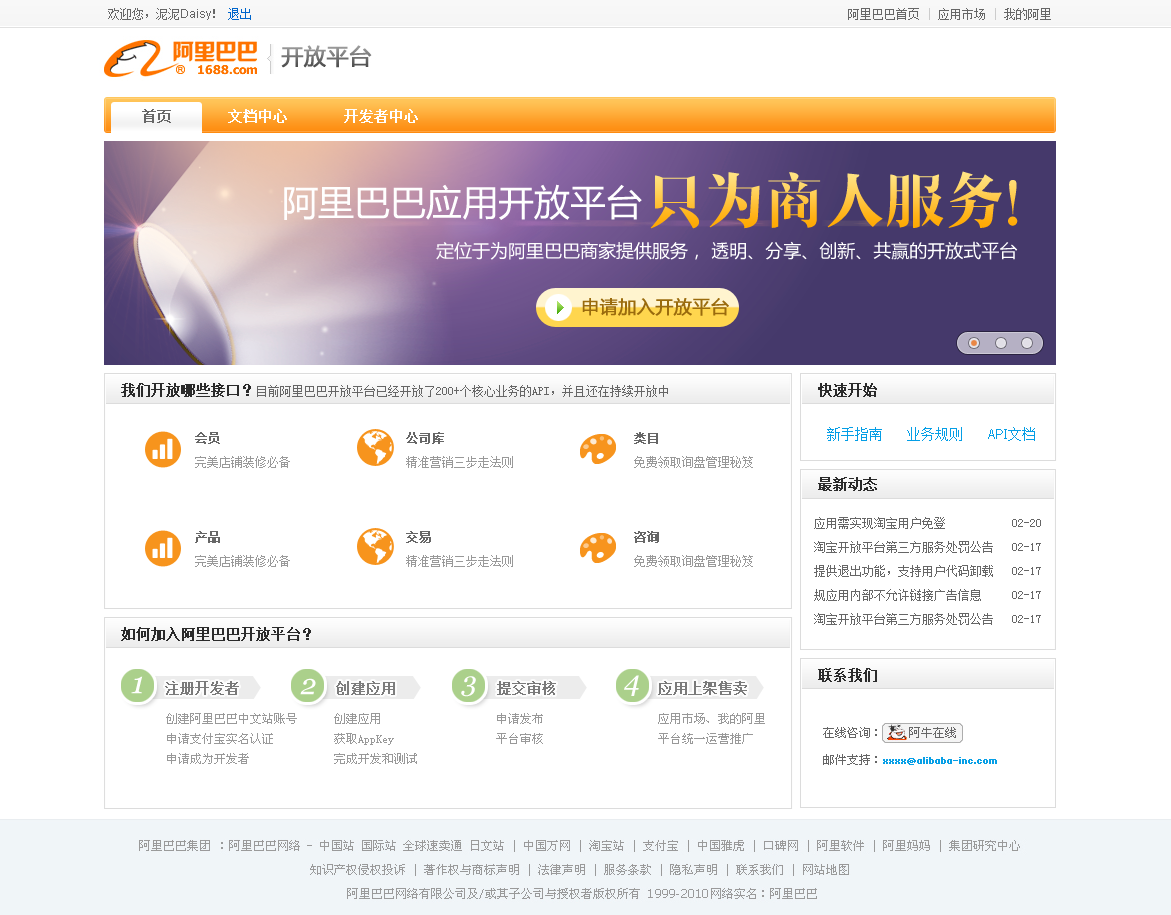
<style>
.page{position:relative;width:1171px;height:915px;background:#ffffff}
.page>*{position:absolute;margin:0}
.t1{font:12px "SimSun";color:#666666}
.t2{font:12px "ArialMT";color:#666666}
.t3{font:12px "SimSun";color:#0066cc}
.t4{font:12px "SimSun";color:#cccccc}
.t5{font:14px "SimSun";color:#ffffff;font-weight:bold}
.t6{font:14px "SimSun";color:#666666;font-weight:bold}
.t7{font:60px "RTWSShangYaTrial-Regular"}
.t8{font:36px "MicrosoftYaHei";color:#ffffff}
.t9{font:18px "MicrosoftYaHei";color:#ffffff}
.t10{font:18px "MicrosoftYaHei";color:#9a6b0d;font-weight:bold}
.t11{font:14px "SimSun";color:#2b2b2b;font-weight:bold}
.t12{font:12px/24px "SimSun";color:#999999}
.t13{font:12px/24px "SimSun";color:#666666;font-weight:bold}
.t14{font:14px "SimSun";color:#049ee6}
.t15{font:14px "Tahoma";color:#049ee6}
.t16{font:12px/24px "SimSun";color:#666666}
.t17{font:12px/24px "SimSun";letter-spacing:0.025em;color:#666666;font-weight:bold}
.t18{font:30.5px "Georgia-Italic";color:#ffffff}
.t19{font:28.8px "Georgia-Italic";color:#ffffff}
.t20{font:27.7px "Georgia-Italic";color:#ffffff}
.t21{font:28.5px "Georgia-Italic";color:#ffffff}
.t22{font:12px/20px "OldSun";color:#999999}
</style>
<div class="page">
<p class="t1" style="left:108px;top:8px;width:107px;height:12px">欢迎您，泥泥<span class="t2">Daisy</span>！</p>
<p class="t3" style="left:228px;top:8px;width:23px;height:12px">退出</p>
<p class="t1" style="left:848px;top:8px;width:203px;height:12px">阿里巴巴首页<span class="t4"> | </span>应用市场<span class="t4"> | </span>我的阿里</p>
<p class="t5" style="left:142px;top:109px;width:276px;height:14px"><span class="t6">首页 </span>      文档中心       开发者中心</p>
<p class="t7" style="left:650px;top:171px;width:368px;height:58px">只为商人服务！</p>
<p class="t8" style="left:284px;top:184px;width:358px;height:36px">阿里巴巴应用开放平台</p>
<p class="t9" style="left:436px;top:241px;width:582px;height:19px">定位于为阿里巴巴商家提供服务， 透明、分享、创新、共赢的开放式平台</p>
<p class="t10" style="left:582px;top:298px;width:147px;height:18px">申请加入开放平台</p>
<p class="t1" style="left:121px;top:383px;width:547px;height:14px"><span class="t11">我们开放哪些接口？</span>目前阿里巴巴开放平台已经开放了200+个核心业务的API，并且还在持续开放中</p>
<p class="t11" style="left:818px;top:383px;width:59px;height:14px">快速开始</p>
<p class="t12" style="left:195px;top:432px;width:95px;height:36px"><span class="t13">会员<br></span>完美店铺装修必备</p>
<p class="t12" style="left:406px;top:432px;width:107px;height:36px"><span class="t13">公司库<br></span>精准营销三步走法则</p>
<p class="t12" style="left:634px;top:432px;width:119px;height:36px"><span class="t13">类目<br></span>免费领取询盘管理秘笈</p>
<p class="t14" style="left:827px;top:427px;width:55px;height:14px">新手指南</p>
<p class="t14" style="left:907px;top:427px;width:55px;height:14px">业务规则</p>
<p class="t15" style="left:988px;top:427px;width:47px;height:14px">API<span class="t14">文档</span></p>
<p class="t11" style="left:818px;top:477px;width:59px;height:14px">最新动态</p>
<p class="t16" style="left:814px;top:517px;width:227px;height:108px">应用需实现淘宝用户免登           02-20<br>淘宝开放平台第三方服务处罚公告   02-17<br>提供退出功能，支持用户代码卸载   02-17<br>规应用内部不允许链接广告信息     02-17<br>淘宝开放平台第三方服务处罚公告   02-17</p>
<p class="t12" style="left:195px;top:531px;width:95px;height:36px"><span class="t17">产品<br></span>完美店铺装修必备</p>
<p class="t12" style="left:406px;top:531px;width:107px;height:36px"><span class="t13">交易<br></span>精准营销三步走法则</p>
<p class="t12" style="left:634px;top:531px;width:119px;height:36px"><span class="t13">咨询<br></span>免费领取询盘管理秘笈</p>
<p class="t11" style="left:121px;top:627px;width:190px;height:14px">如何加入阿里巴巴开放平台？</p>
<p class="t18" style="left:131px;top:676px;width:12px;height:18px">1</p>
<p class="t19" style="left:300px;top:678px;width:16px;height:17px">2</p>
<p class="t20" style="left:461px;top:676px;width:15px;height:21px">3</p>
<p class="t21" style="left:624px;top:675px;width:15px;height:21px">4</p>
<p class="t11" style="left:818px;top:668px;width:59px;height:14px">联系我们</p>
<p class="t6" style="left:165px;top:681px;width:74px;height:14px;opacity:0.85">注册开发者</p>
<p class="t6" style="left:336px;top:681px;width:59px;height:14px;opacity:0.84">创建应用</p>
<p class="t6" style="left:497px;top:681px;width:59px;height:14px;opacity:0.85">提交审核</p>
<p class="t6" style="left:658px;top:681px;width:89px;height:14px;opacity:0.85">应用上架售卖</p>
<p class="t22" style="left:166px;top:713px;width:131px;height:51px">创建阿里巴巴中文站账号<br>申请支付宝实名认证<br>申请成为开发者</p>
<p class="t22" style="left:334px;top:713px;width:83px;height:51px">创建应用<br>获取AppKey<br>完成开发和测试</p>
<p class="t22" style="left:496px;top:713px;width:47px;height:31px">申请发布<br>平台审核</p>
<p class="t22" style="left:658px;top:713px;width:107px;height:31px">应用市场、我的阿里<br>平台统一运营推广</p>
</div>
